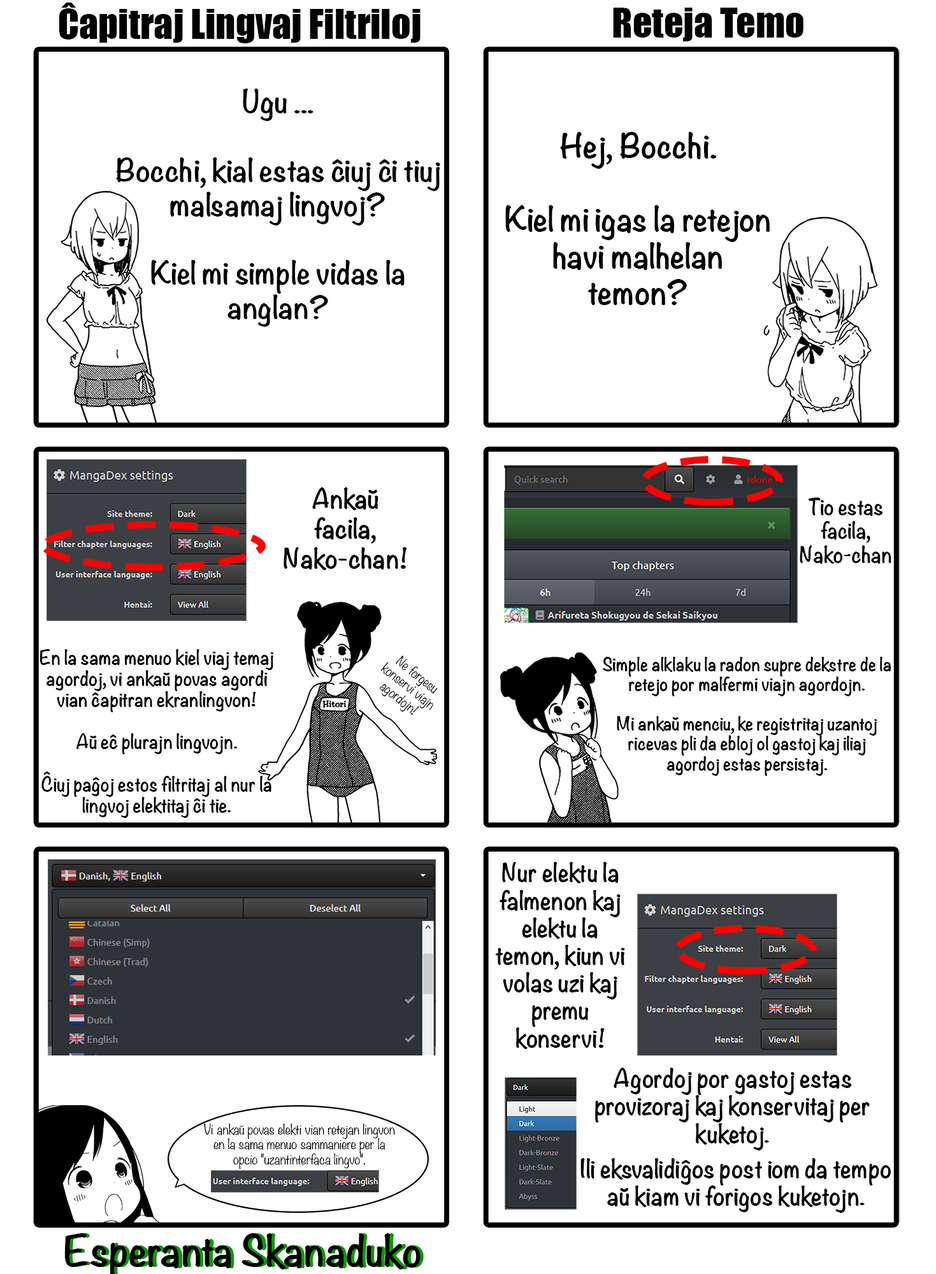
<style>
.page{position:relative;width:936px;height:1274px;background:#ffffff}
.page>*{position:absolute;margin:0}
.t1{font:38.2px "Impact";color:#000000}
.t2{font:28.5px "Noteworthy-Bold";color:#000000}
.t3{font:30.6px "Noteworthy-Bold";color:#000000}
.t4{font:24.8px "Noteworthy-Bold";color:#000000}
.t5{font:19.8px "Noteworthy-Bold";color:#000000}
.t6{font:17.6px "Noteworthy-Bold";color:#000000}
.t7{font:12.3px "Noteworthy-Light";color:#000000}
.t8{font:16.5px "Noteworthy-Bold";color:#000000}
.t9{font:22.9px "Noteworthy-Bold";color:#000000}
.t10{font:12.5px "Noteworthy-Light";color:#000000}
</style>
<div class="page">
<p class="t1" style="left:59px;top:3px;width:361px;height:40px">Ĉapitraj Lingvaj Filtriloj</p>
<p class="t1" style="left:613px;top:8px;width:190px;height:33px">Reteja Temo</p>
<p class="t2" style="left:116px;top:89px;width:324px;height:238px;text-align:center">Ugu ...<br><br>Bocchi, kial estas ĉiuj ĉi tiuj malsamaj lingvoj?<br><br>Kiel mi simple vidas la anglan?</p>
<p class="t3" style="left:505px;top:132px;width:265px;height:173px;text-align:center">Hej, Bocchi.<br><br>Kiel mi igas la retejon havi malhelan temon?</p>
<p class="t4" style="left:283px;top:487px;width:124px;height:83px;text-align:center">Ankaŭ facila, Nako-chan!</p>
<p class="t5" style="left:800px;top:498px;width:91px;height:66px;text-align:center">Tio estas facila, Nako-chan</p>
<p class="t6" style="left:39px;top:649px;width:235px;height:169px;text-align:center">En la sama menuo kiel viaj temaj agordoj, vi ankaŭ povas agordi vian ĉapitran ekranlingvon!<br><br>Aŭ eĉ plurajn lingvojn.<br><br>Ĉiuj paĝoj estos filtritaj al nur la lingvoj elektitaj ĉi tie.</p>
<p class="t7" style="left:380px;top:656px;width:58px;height:59px;rotate:39deg">Ne forgesu konservi viajn agordojn!</p>
<p class="t8" style="left:603px;top:657px;width:288px;height:119px;text-align:center">Simple alklaku la radon supre dekstre de la retejo por malfermi viajn agordojn.<br><br>Mi ankaŭ menciu, ke registritaj uzantoj ricevas pli da ebloj ol gastoj kaj iliaj agordoj estas persistaj.</p>
<p class="t9" style="left:495px;top:862px;width:130px;height:187px;text-align:center">Nur elektu la falmenon kaj elektu la temon, kiun vi volas uzi kaj premu konservi!</p>
<p class="t9" style="left:595px;top:1068px;width:275px;height:83px;text-align:center">Agordoj por gastoj estas provizoraj kaj konservitaj per kuketoj.</p>
<p class="t10" style="left:203px;top:1124px;width:192px;height:45px;text-align:center">Vi ankaŭ povas elekti vian retejan lingvon en la sama menuo sammaniere per la opcio "uzantinterfaca lingvo".</p>
<p class="t9" style="left:580px;top:1158px;width:311px;height:55px;text-align:center">Ili eksvalidiĝos post iom da tempo aŭ kiam vi forigos kuketojn.</p>
</div>
